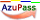
<style>
.page{position:relative;width:40px;height:20px;background:#ffffff}
.page>*{position:absolute;margin:0}
.t1{font:8px "Verdana";color:#006600;font-weight:bold}
.t2{font:8px "Verdana";color:#000066;font-weight:bold}
.t3{font:8px "Verdana";color:#990000;font-weight:bold}
</style>
<div class="page">
<p class="t1" style="left:1px;top:4px;width:35px;height:7px"><span class="t2">Az</span><span class="t3">uP</span>ass</p>
</div>
